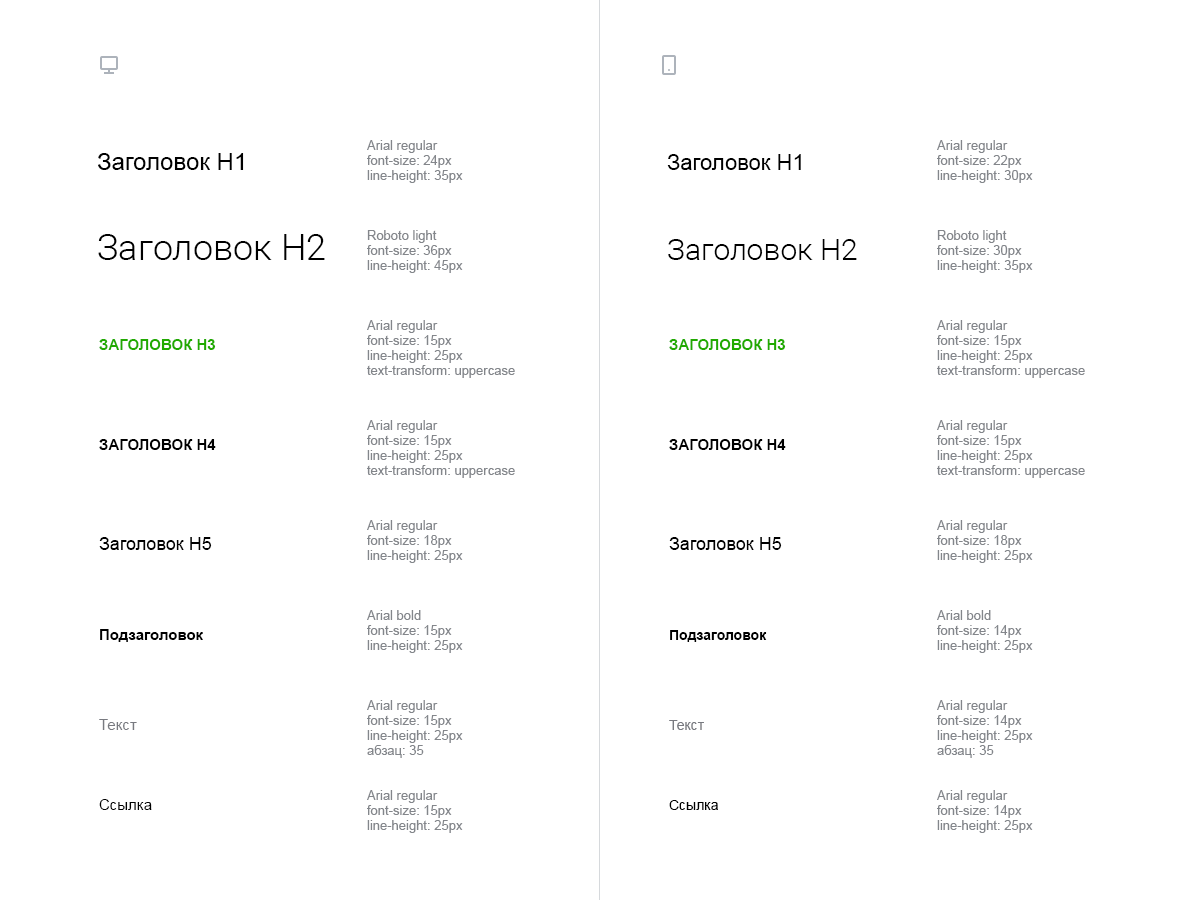
<style>
.page{position:relative;width:1200px;height:900px;background:#ffffff}
.page>*{position:absolute;margin:0}
.t1{font:13px/15px "ArialMT";color:#83868b}
.t2{font:24px "ArialMT";color:#000000}
.t3{font:22px "ArialMT";color:#000000}
.t4{font:36px "Roboto-Light";color:#000000}
.t5{font:30px "Roboto-Light";color:#000000}
.t6{font:15px "Arial-BoldMT";color:#21aa00;text-transform:uppercase}
.t7{font:15px "Arial-BoldMT";color:#000000;text-transform:uppercase}
.t8{font:18px "ArialMT";color:#000000}
.t9{font:15px "Arial-BoldMT";color:#000000}
.t10{font:14px "Arial-BoldMT";color:#000000}
.t11{font:15px "ArialMT";color:#787a80}
.t12{font:14px "ArialMT";color:#787a80}
.t13{font:15px "ArialMT";color:#000000}
.t14{font:14px "ArialMT";color:#000000}
</style>
<div class="page">
<p class="t1" style="left:367px;top:140px;width:96px;height:43px">Arial regular<br>font-size: 24px<br>line-height: 35px</p>
<p class="t1" style="left:937px;top:140px;width:96px;height:43px">Arial regular<br>font-size: 22px<br>line-height: 30px</p>
<p class="t2" style="left:98px;top:153px;width:146px;height:17px">Заголовок H1</p>
<p class="t3" style="left:667px;top:154px;width:134px;height:16px">Заголовок H1</p>
<p class="t1" style="left:367px;top:230px;width:96px;height:43px">Roboto light<br>font-size: 36px<br>line-height: 45px</p>
<p class="t1" style="left:937px;top:230px;width:96px;height:43px">Roboto light<br>font-size: 30px<br>line-height: 35px</p>
<p class="t4" style="left:98px;top:234px;width:227px;height:26px">Заголовок H2</p>
<p class="t5" style="left:668px;top:239px;width:189px;height:21px">Заголовок H2</p>
<p class="t1" style="left:367px;top:320px;width:148px;height:58px">Arial regular<br>font-size: 15px<br>line-height: 25px<br>text-transform: uppercase</p>
<p class="t1" style="left:937px;top:320px;width:148px;height:58px">Arial regular<br>font-size: 15px<br>line-height: 25px<br>text-transform: uppercase</p>
<p class="t6" style="left:99px;top:339px;width:117px;height:11px">ЗАГОЛОВОК H3</p>
<p class="t6" style="left:669px;top:339px;width:117px;height:11px">ЗАГОЛОВОК H3</p>
<p class="t1" style="left:367px;top:420px;width:148px;height:58px">Arial regular<br>font-size: 15px<br>line-height: 25px<br>text-transform: uppercase</p>
<p class="t1" style="left:937px;top:420px;width:148px;height:58px">Arial regular<br>font-size: 15px<br>line-height: 25px<br>text-transform: uppercase</p>
<p class="t7" style="left:99px;top:439px;width:117px;height:11px">ЗАГОЛОВОК H4</p>
<p class="t7" style="left:669px;top:439px;width:117px;height:11px">ЗАГОЛОВОК H4</p>
<p class="t1" style="left:367px;top:520px;width:96px;height:43px">Arial regular<br>font-size: 18px<br>line-height: 25px</p>
<p class="t1" style="left:937px;top:520px;width:96px;height:43px">Arial regular<br>font-size: 18px<br>line-height: 25px</p>
<p class="t8" style="left:99px;top:537px;width:113px;height:13px">Заголовок H5</p>
<p class="t8" style="left:669px;top:537px;width:113px;height:13px">Заголовок H5</p>
<p class="t1" style="left:367px;top:610px;width:96px;height:43px">Arial bold<br>font-size: 15px<br>line-height: 25px</p>
<p class="t1" style="left:937px;top:610px;width:96px;height:43px">Arial bold<br>font-size: 14px<br>line-height: 25px</p>
<p class="t9" style="left:100px;top:629px;width:103px;height:13px">Подзаголовок</p>
<p class="t10" style="left:670px;top:630px;width:97px;height:12px">Подзаголовок</p>
<p class="t1" style="left:367px;top:700px;width:96px;height:58px">Arial regular<br>font-size: 15px<br>line-height: 25px<br>абзац: 35</p>
<p class="t1" style="left:937px;top:700px;width:96px;height:58px">Arial regular<br>font-size: 14px<br>line-height: 25px<br>абзац: 35</p>
<p class="t11" style="left:99px;top:719px;width:38px;height:11px">Текст</p>
<p class="t12" style="left:669px;top:720px;width:35px;height:10px">Текст</p>
<p class="t1" style="left:367px;top:790px;width:96px;height:43px">Arial regular<br>font-size: 15px<br>line-height: 25px</p>
<p class="t1" style="left:937px;top:790px;width:96px;height:43px">Arial regular<br>font-size: 14px<br>line-height: 25px</p>
<p class="t13" style="left:99px;top:799px;width:53px;height:11px">Ссылка</p>
<p class="t14" style="left:669px;top:800px;width:49px;height:10px">Ссылка</p>
</div>
